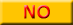
<style>
.page{position:relative;width:73px;height:25px;background:#ffc501}
.page>*{position:absolute;margin:0}
.t1{font:17.5px "Verdana";font-weight:bold}
</style>
<div class="page">
<p class="t1" style="left:24px;top:5px;width:26px;height:14px">NO</p>
</div>
